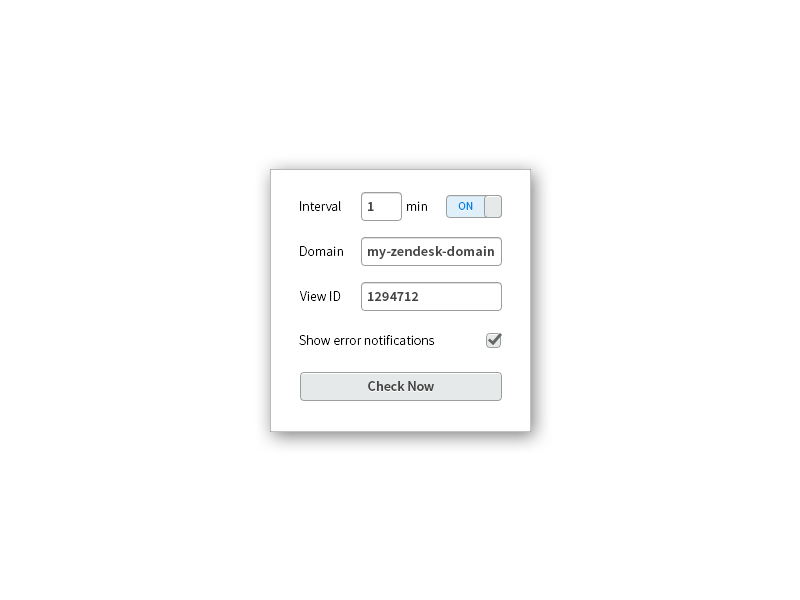
<style>
.page{position:relative;width:800px;height:600px;background:#ffffff}
.page>*{position:absolute;margin:0}
.t1{font:14px "SourceSansPro-Light";color:#000000}
.t2{font:14px "SourceSansPro-Semibold";letter-spacing:0.025em;color:#454545}
.t3{font:12px "SourceSansPro-Regular";color:#0083e8}
.t4{font:14px "SourceSansPro-Semibold";color:#454545}
</style>
<div class="page">
<p class="t1" style="left:300px;top:201px;width:41px;height:10px">Interval</p>
<p class="t2" style="left:368px;top:202px;width:6px;height:9px">1</p>
<p class="t1" style="left:407px;top:201px;width:20px;height:10px">min</p>
<p class="t3" style="left:458px;top:202px;width:15px;height:8px">ON</p>
<p class="t1" style="left:300px;top:246px;width:43px;height:10px">Domain</p>
<p class="t2" style="left:368px;top:246px;width:126px;height:13px">my-zendesk-domain</p>
<p class="t1" style="left:300px;top:291px;width:41px;height:10px">View ID</p>
<p class="t2" style="left:368px;top:292px;width:51px;height:9px">1294712</p>
<p class="t1" style="left:299px;top:335px;width:136px;height:10px">Show error notifications</p>
<p class="t4" style="left:368px;top:381px;width:66px;height:10px">Check Now</p>
</div>
